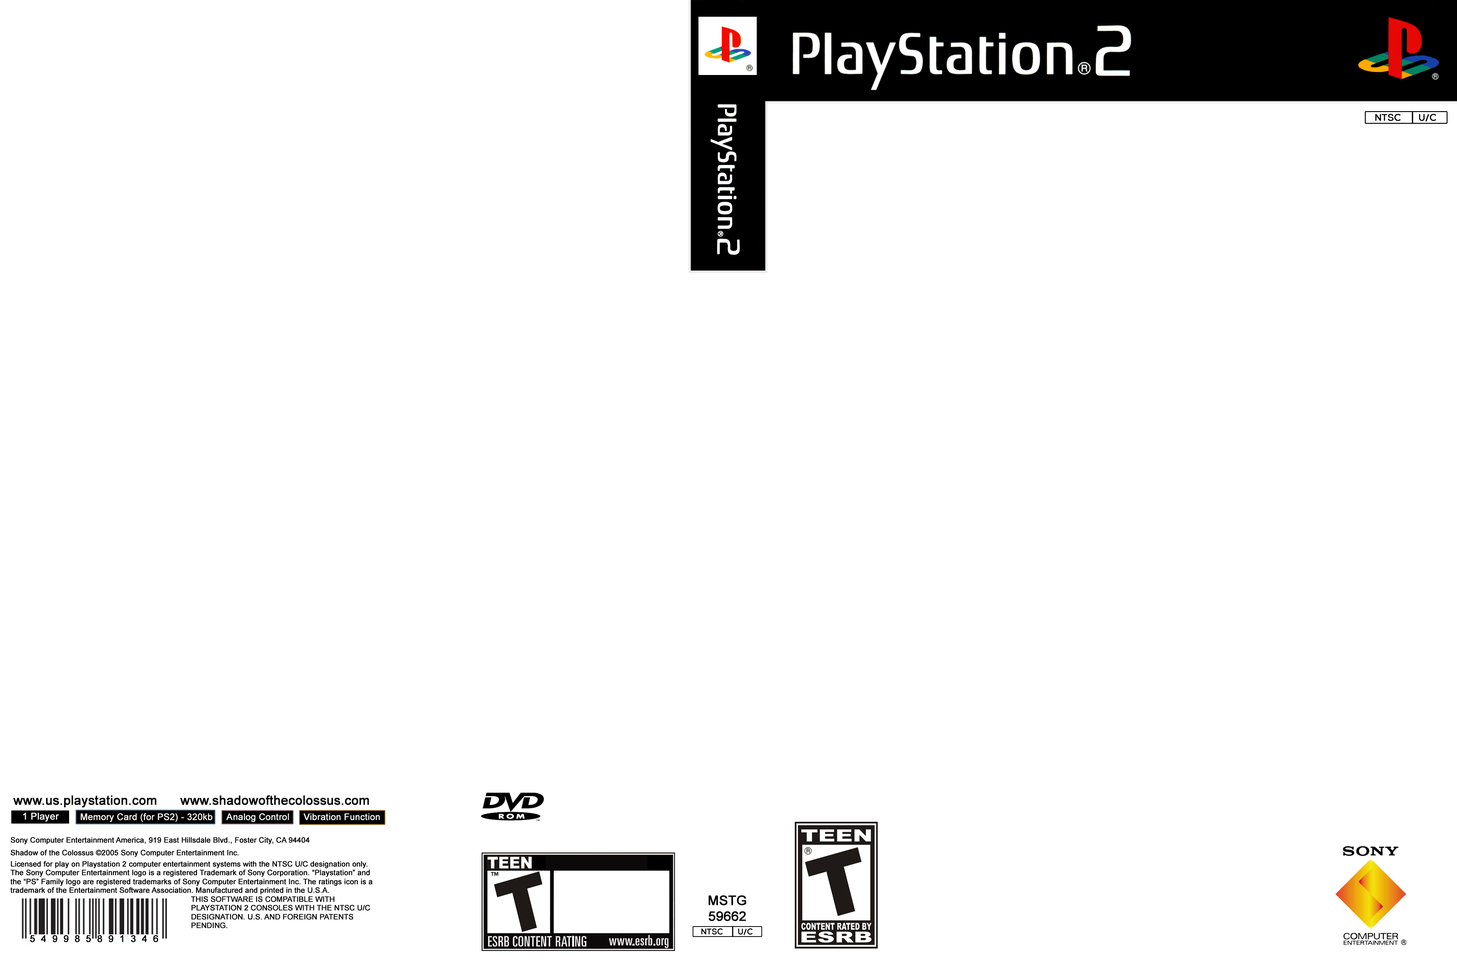
<style>
.page{position:relative;width:1457px;height:974px;background:#ffffff}
.page>*{position:absolute;margin:0}
.t1{font:12.7px "ArialMT";color:#000000;font-weight:bold}
.t2{font:9.4px "ArialMT";color:#ffffff;font-weight:bold}
.t3{font:9px "ArialMT";color:#ffffff;font-weight:bold}
.t4{font:7.3px "ArialMT";color:#000000;font-weight:bold}
.t5{font:7.3px/7.1px "ArialMT";color:#000000;font-weight:bold}
.t6{font:7.3px/5.6px "ArialMT";color:#000000;font-weight:bold}
.t7{font:13.1px "ArialMT";color:#000000;font-weight:bold}
</style>
<div class="page">
<p class="t1" style="left:13px;top:795px;width:356px;height:13px">www.us.playstation.com      www.shadowofthecolossus.com</p>
<p class="t2" style="left:23px;top:813px;width:36px;height:9px">1 Player</p>
<p class="t3" style="left:80px;top:813px;width:132px;height:9px">Memory Card (for PS2) - 320kb</p>
<p class="t3" style="left:226px;top:813px;width:63px;height:9px">Analog Control</p>
<p class="t3" style="left:303px;top:813px;width:77px;height:7px">Vibration Function</p>
<p class="t4" style="left:10px;top:837px;width:363px;height:91px"><span class="t5">Sony Computer Entertainment America, 919 East Hillsdale Blvd., Foster City, CA 94404<br><br></span><span class="t6">Shadow of the Colossus ©2005 Sony Computer Entertainment Inc.<br><br>Licensed for play on Playstation 2 computer entertainment systems with the NTSC U/C designation only.       <br></span>The Sony Computer Entertainment logo is a registered Trademark of Sony Corporation. “Playstation” and the “PS” Family logo are registered trademarks of Sony Computer Entertainment Inc. The ratings icon is a trademark of the Entertainment Software Association. Manufactured and printed in the U.S.A.<br>                                                                                 THIS SOFTWARE IS COMPATIBLE WITH  <br>                                                                                 PLAYSTATION 2 CONSOLES WITH THE NTSC U/C <br>                                                                                 DESIGNATION. U.S. AND FOREIGN PATENTS  <br>                                                                                 PENDING.</p>
<p class="t7" style="left:708px;top:895px;width:38px;height:26px;text-align:center">MSTG<br>59662</p>
</div>
